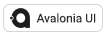
<style>
.page{position:relative;width:106px;height:32px;background:#ffffff}
.page>*{position:absolute;margin:0}
.t1{font:12px "Roboto-Regular";color:#2b2b2b}
</style>
<div class="page">
<p class="t1" style="left:36px;top:13px;width:60px;height:10px">Avalonia UI</p>
</div>
